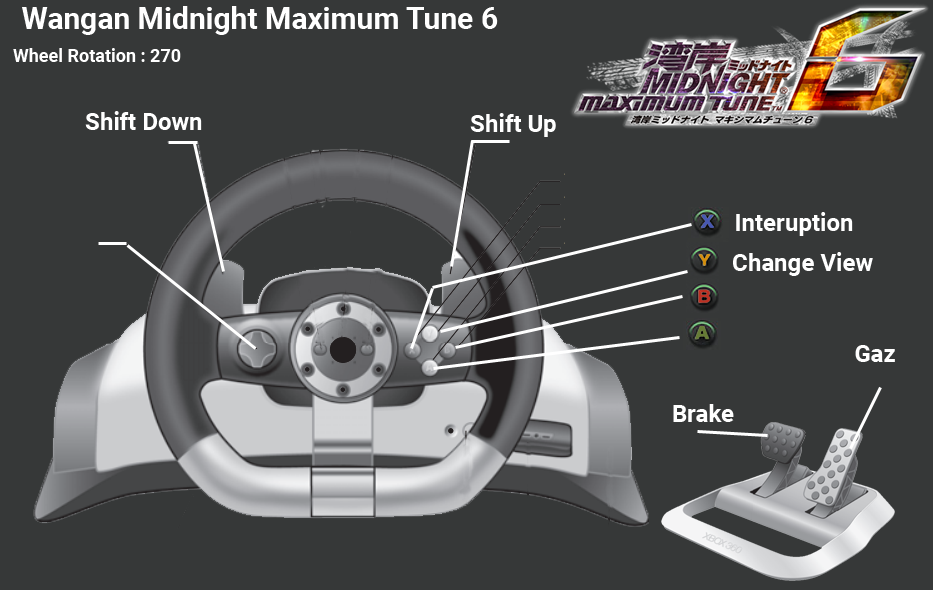
<style>
.page{position:relative;width:933px;height:590px;background:#363838}
.page>*{position:absolute;margin:0}
.t1{font:30px "Roboto-Bold";color:#ffffff}
.t2{font:18px "Roboto-Bold";color:#ffffff}
.t3{font:24px "Roboto-Bold";color:#ffffff}
</style>
<div class="page">
<p class="t1" style="left:22px;top:6px;width:476px;height:29px">Wangan Midnight Maximum Tune 6</p>
<p class="t2" style="left:13px;top:48px;width:168px;height:14px">Wheel Rotation : 270</p>
<p class="t3" style="left:85px;top:111px;width:117px;height:19px">Shift Down</p>
<p class="t3" style="left:470px;top:113px;width:86px;height:24px">Shift Up</p>
<p class="t3" style="left:736px;top:212px;width:117px;height:24px">Interuption</p>
<p class="t3" style="left:733px;top:252px;width:140px;height:24px">Change View</p>
<p class="t3" style="left:855px;top:345px;width:40px;height:17px">Gaz</p>
<p class="t3" style="left:673px;top:404px;width:61px;height:18px">Brake</p>
</div>
